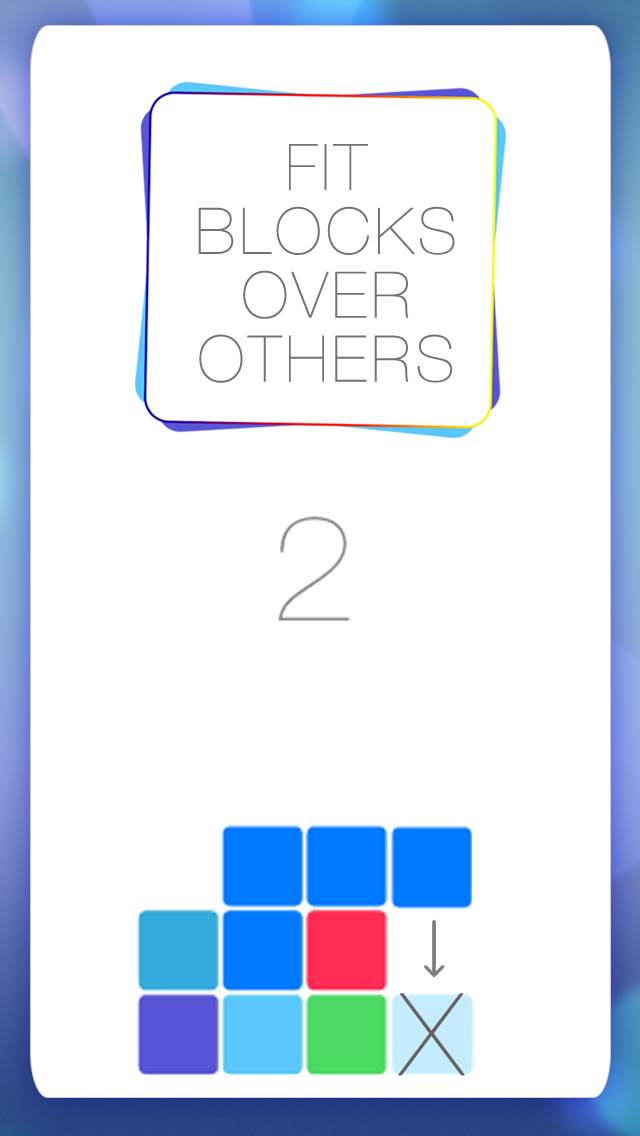
<style>
.page{position:relative;width:640px;height:1136px;background:#ffffff}
.page>*{position:absolute;margin:0}
.t1{font:63.9px/63.9px "HelveticaNeueCyr-UltraLight";letter-spacing:0.05em;color:#727277;text-transform:uppercase;font-weight:bold}
</style>
<div class="page">
<p class="t1" style="left:198px;top:144px;width:257px;height:239px;text-align:center">fit<br>blocks<br>over<br>others</p>
</div>
